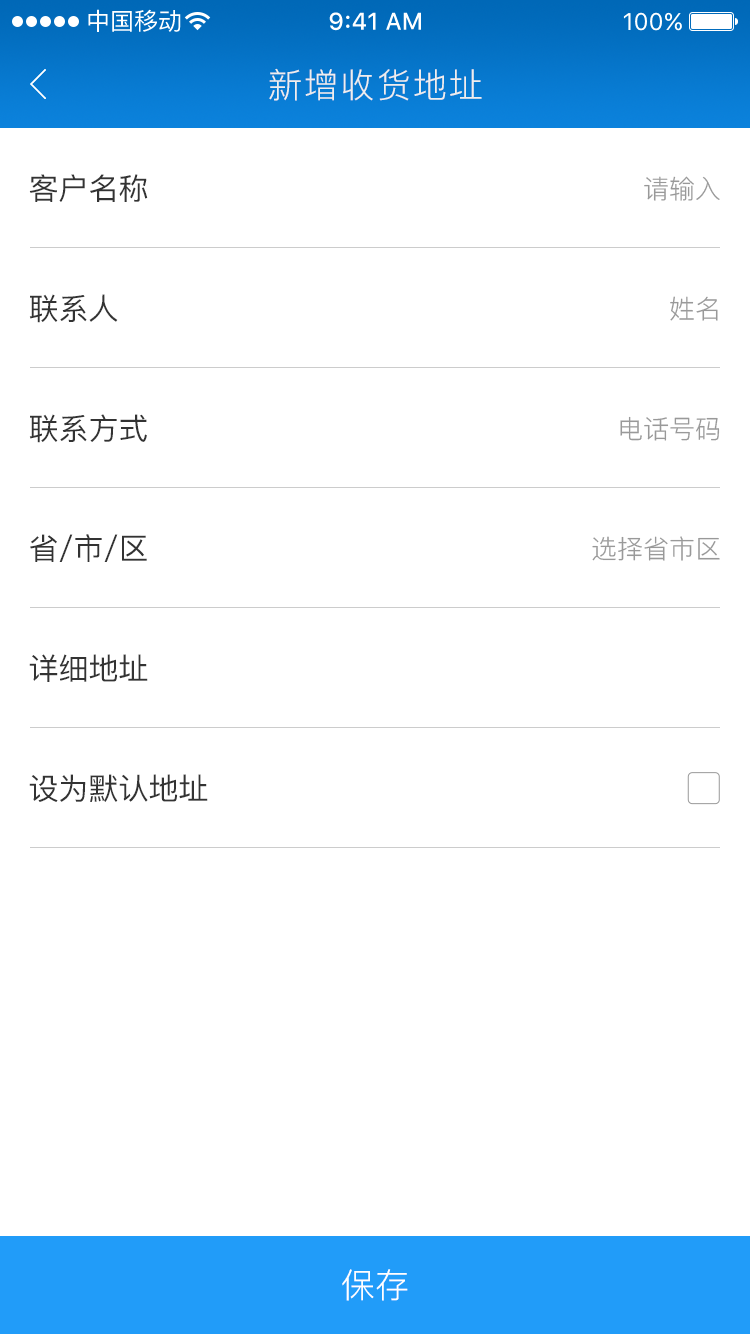
<style>
.page{position:relative;width:750px;height:1334px;background:#ffffff}
.page>*{position:absolute;margin:0}
.t1{font:34px "PingFang-SC-Regular";letter-spacing:0.06em;color:#eeeeee}
.t2{font:30px "PingFang-SC-Medium";color:#333333}
.t3{font:26px "PingFang-SC-Regular";color:#999999}
.t4{font:34px "PingFang-SC-Regular";color:#ffffff}
</style>
<div class="page">
<p class="t1" style="left:269px;top:68px;width:213px;height:33px">新增收货地址</p>
<p class="t2" style="left:29px;top:174px;width:119px;height:28px">客户名称</p>
<p class="t3" style="left:644px;top:176px;width:76px;height:25px">请输入</p>
<p class="t2" style="left:29px;top:294px;width:89px;height:29px">联系人</p>
<p class="t3" style="left:670px;top:296px;width:48px;height:25px">姓名</p>
<p class="t2" style="left:29px;top:414px;width:118px;height:29px">联系方式</p>
<p class="t3" style="left:620px;top:416px;width:100px;height:25px">电话号码</p>
<p class="t2" style="left:30px;top:534px;width:117px;height:28px">省/市/区</p>
<p class="t3" style="left:592px;top:536px;width:128px;height:25px">选择省市区</p>
<p class="t2" style="left:29px;top:654px;width:119px;height:28px">详细地址</p>
<p class="t2" style="left:29px;top:774px;width:179px;height:28px">设为默认地址</p>
<p class="t4" style="left:342px;top:1269px;width:66px;height:32px">保存</p>
</div>
